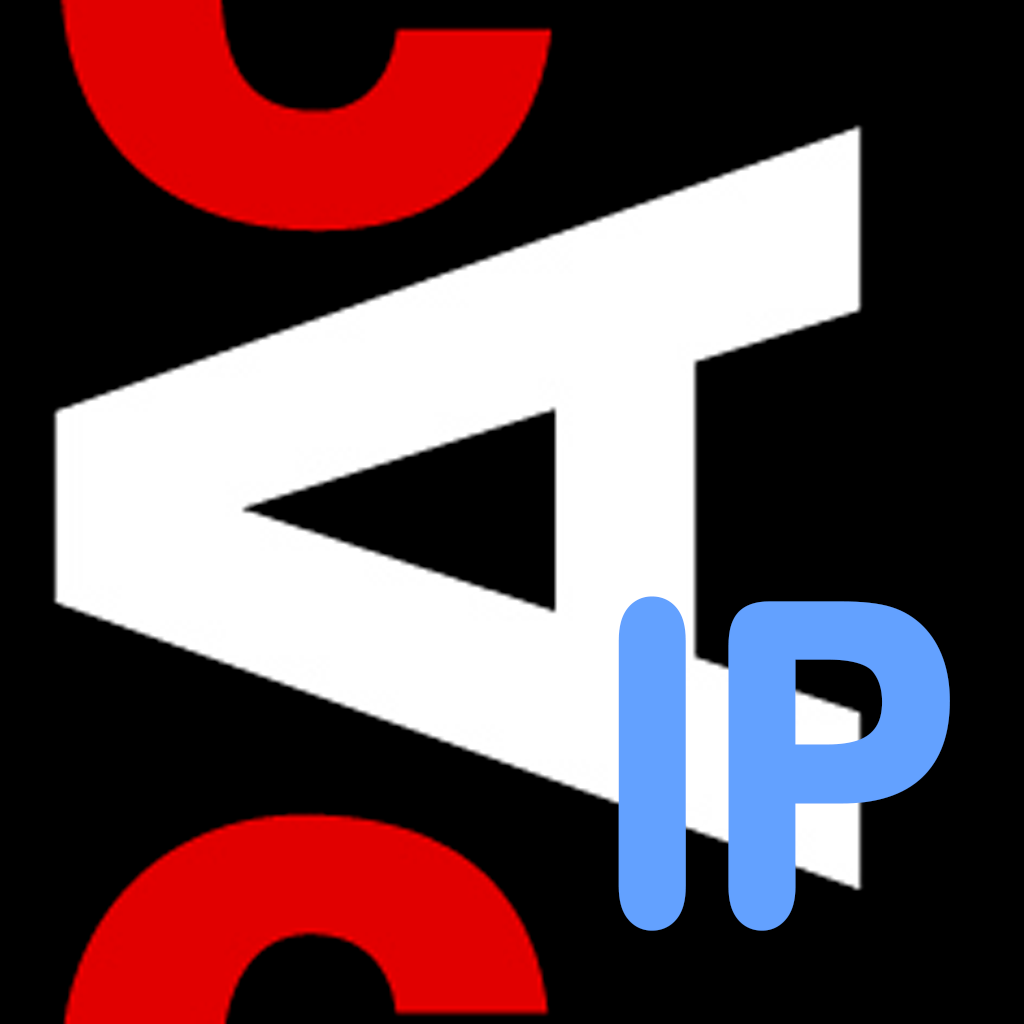
<style>
.page{position:relative;width:1024px;height:1024px;background:#000000}
.page>*{position:absolute;margin:0}
.t1{font:437px "ArialRoundedMTBold";letter-spacing:-0.05em;color:#63a1ff;font-weight:bold;scale:0.88 1}
</style>
<div class="page">
<p class="t1" style="left:618px;top:596px;width:332px;height:335px">IP</p>
</div>
